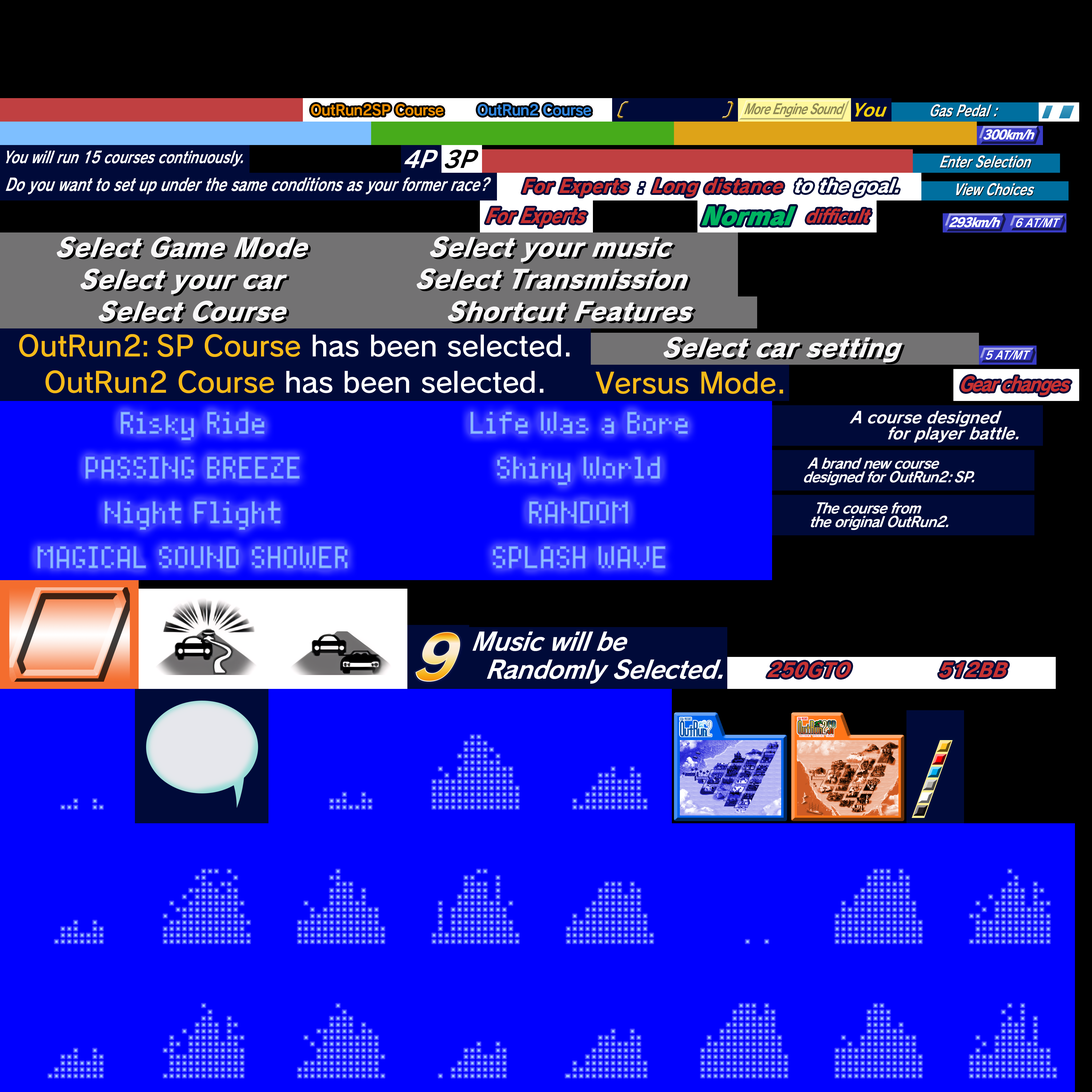
<style>
.page{position:relative;width:1092px;height:1092px;background:#0000ff}
.page>*{position:absolute;margin:0}
.t1{font:14.4px "RodinPro-B";letter-spacing:-0.044em;color:#ec8d00}
.t2{font:14.4px "RodinPro-B";letter-spacing:-0.044em;color:#3186de}
.t3{font:14.6px "RodinPro-B";letter-spacing:-0.058em;color:#8f8954;scale:0.73 1}
.t4{font:18.7px "RodinPro-B";letter-spacing:-0.005em;color:#f9d00c;scale:0.94 1}
.t5{font:16px "RodinPro-B";letter-spacing:-0.01em;color:#ffffff;scale:0.74 1}
.t6{font:16px "RodinPro-B";letter-spacing:0.338em;color:#ffffff;scale:0.74 1}
.t7{font:13.3px "RodinPro-EB";letter-spacing:-0.075em;color:#ffffff;scale:0.9 1}
.t8{font:24.5px "RodinPro-B";letter-spacing:-0.005em;color:#ffffff;scale:0.94 1}
.t9{font:24.5px "RodinPro-B";letter-spacing:-0.005em;color:#000000;scale:0.94 1}
.t10{font:17.1px "RodinPro-B";letter-spacing:-0.005em;color:#ffffff;scale:0.74 1}
.t11{font:18.1px "RodinPro-B";letter-spacing:-0.005em;color:#ffffff;scale:0.74 1}
.t12{font:19px "RodinPro-EB";color:#c73232;scale:0.92 1}
.t13{font:18.8px "RodinPro-EB";letter-spacing:-0.067em;color:#ffffff;scale:0.96 1}
.t14{font:19.4px "RodinPro-EB";color:#c73232;scale:0.91 1}
.t15{font:19.3px "RodinPro-EB";letter-spacing:-0.018em;color:#ffffff;scale:0.94 1}
.t16{font:21px "RodinPro-EB";letter-spacing:-0.022em;color:#c73232;scale:0.81 1}
.t17{font:25.9px "RodinPro-UB";letter-spacing:-0.035em;color:#00b360;scale:0.94 1}
.t18{font:19.4px "RodinPro-EB";letter-spacing:-0.038em;color:#c73232;scale:0.87 1}
.t19{font:12.1px "RodinPro-B";letter-spacing:-0.02em;color:#ffffff;scale:0.83 1}
.t20{font:27.1px "RodinPro-EB";letter-spacing:0.004em;color:#f7f6f7;scale:0.94 1}
.t21{font:27.1px "RodinPro-EB";letter-spacing:0.003em;color:#f7f6f7;scale:0.94 1}
.t22{font:28px "RodinPro-DB";letter-spacing:-0.005em;color:#ffffff}
.t23{font:28px "RodinPro-DB";letter-spacing:-0.005em;color:#f7ba18}
.t24{font:28px "RodinPro-DB";letter-spacing:-0.065em;color:#f7ba18}
.t25{font:28px "RodinPro-DB";letter-spacing:0.175em;color:#f7ba18}
.t26{font:20.3px "RodinPro-EB";letter-spacing:-0.083em;color:#c73232;scale:0.86 1}
.t27{font:17.1px/16.8px "RodinPro-B";letter-spacing:-0.005em;color:#ffffff;scale:0.92 1}
.t28{font:14.9px/14.4px "RodinPro-B";letter-spacing:-0.045em;color:#ffffff;scale:0.92 1}
.t29{font:14.9px/14.4px "RodinPro-B";letter-spacing:0.115em;color:#ffffff;scale:0.92 1}
.t30{font:26.1px "RodinPro-B";letter-spacing:-0.024em;color:#ffffff;scale:0.93 1}
.t31{font:26.1px "RodinPro-B";letter-spacing:-0.023em;color:#ffffff;scale:0.93 1}
.t32{font:20.3px "RodinPro-EB";letter-spacing:0.005em;color:#c73232;scale:0.94 1}
.t33{font:20.5px "RodinPro-EB";letter-spacing:-0.002em;color:#c73232;scale:0.94 1}
</style>
<div class="page">
<p class="t1" style="left:311px;top:104px;width:132px;height:12px">OutRun2SP Course</p>
<p class="t2" style="left:477px;top:104px;width:114px;height:12px">OutRun2 Course</p>
<p class="t3" style="left:744px;top:103px;width:101px;height:14px">More Engine Sound</p>
<p class="t4" style="left:855px;top:103px;width:32px;height:14px">You</p>
<p class="t5" style="left:930px;top:104px;width:69px;height:13px">Gas Peda<span class="t6">l</span>:</p>
<p class="t7" style="left:983px;top:129px;width:52px;height:11px">300km/h</p>
<p class="t8" style="left:404px;top:150px;width:34px;height:18px">4P</p>
<p class="t9" style="left:445px;top:150px;width:33px;height:18px">3P</p>
<p class="t10" style="left:6px;top:151px;width:237px;height:16px">You will run 15 courses continuously.</p>
<p class="t5" style="left:940px;top:155px;width:91px;height:13px">Enter Selection</p>
<p class="t11" style="left:6px;top:177px;width:485px;height:17px">Do you want to set up under the same conditions as your former race?</p>
<p class="t12" style="left:522px;top:179px;width:107px;height:18px">For Experts</p>
<p class="t13" style="left:638px;top:183px;width:7px;height:10px">:</p>
<p class="t14" style="left:652px;top:179px;width:131px;height:18px">Long distance</p>
<p class="t15" style="left:795px;top:179px;width:104px;height:17px">to the goal.</p>
<p class="t5" style="left:956px;top:183px;width:78px;height:12px">View Choices</p>
<p class="t16" style="left:486px;top:208px;width:101px;height:19px">For Experts</p>
<p class="t17" style="left:701px;top:206px;width:95px;height:20px">Normal</p>
<p class="t18" style="left:806px;top:208px;width:65px;height:15px">difficult</p>
<p class="t7" style="left:949px;top:217px;width:51px;height:10px">293km/h</p>
<p class="t19" style="left:1016px;top:218px;width:45px;height:9px">6 AT/MT</p>
<p class="t20" style="left:57px;top:236px;width:251px;height:22px">Select Game Mode</p>
<p class="t20" style="left:430px;top:236px;width:243px;height:26px">Select your music</p>
<p class="t21" style="left:81px;top:268px;width:206px;height:26px">Select your car</p>
<p class="t21" style="left:417px;top:268px;width:271px;height:21px">Select Transmission</p>
<p class="t20" style="left:99px;top:300px;width:188px;height:22px">Select Course</p>
<p class="t20" style="left:448px;top:300px;width:246px;height:22px">Shortcut Features</p>
<p class="t22" style="left:19px;top:334px;width:551px;height:23px"><span class="t23">OutRun</span><span class="t24">2</span><span class="t25">:</span><span class="t23">SP Course </span>has been selected.</p>
<p class="t21" style="left:664px;top:337px;width:238px;height:26px">Select car setting</p>
<p class="t19" style="left:986px;top:350px;width:45px;height:10px">5 AT/MT</p>
<p class="t22" style="left:45px;top:370px;width:499px;height:23px"><span class="t23">OutRun2 Course </span>has been selected.</p>
<p class="t23" style="left:596px;top:371px;width:187px;height:23px">Versus Mode.</p>
<p class="t26" style="left:961px;top:376px;width:110px;height:19px">Gear changes</p>
<p class="t27" style="left:850px;top:411px;width:169px;height:32px">A course designed<br>for player battle.</p>
<p class="t28" style="left:804px;top:457px;width:170px;height:28px">A brand new course<br>designed for OutRun2<span class="t29">:</span>SP.</p>
<p class="t28" style="left:811px;top:502px;width:138px;height:28px">The course from<br>the original OutRun2.</p>
<p class="t30" style="left:472px;top:631px;width:155px;height:20px">Music will be</p>
<p class="t31" style="left:487px;top:659px;width:236px;height:25px">Randomly Selected.</p>
<p class="t32" style="left:767px;top:662px;width:84px;height:16px">250GTO</p>
<p class="t33" style="left:939px;top:662px;width:69px;height:16px">512BB</p>
</div>
